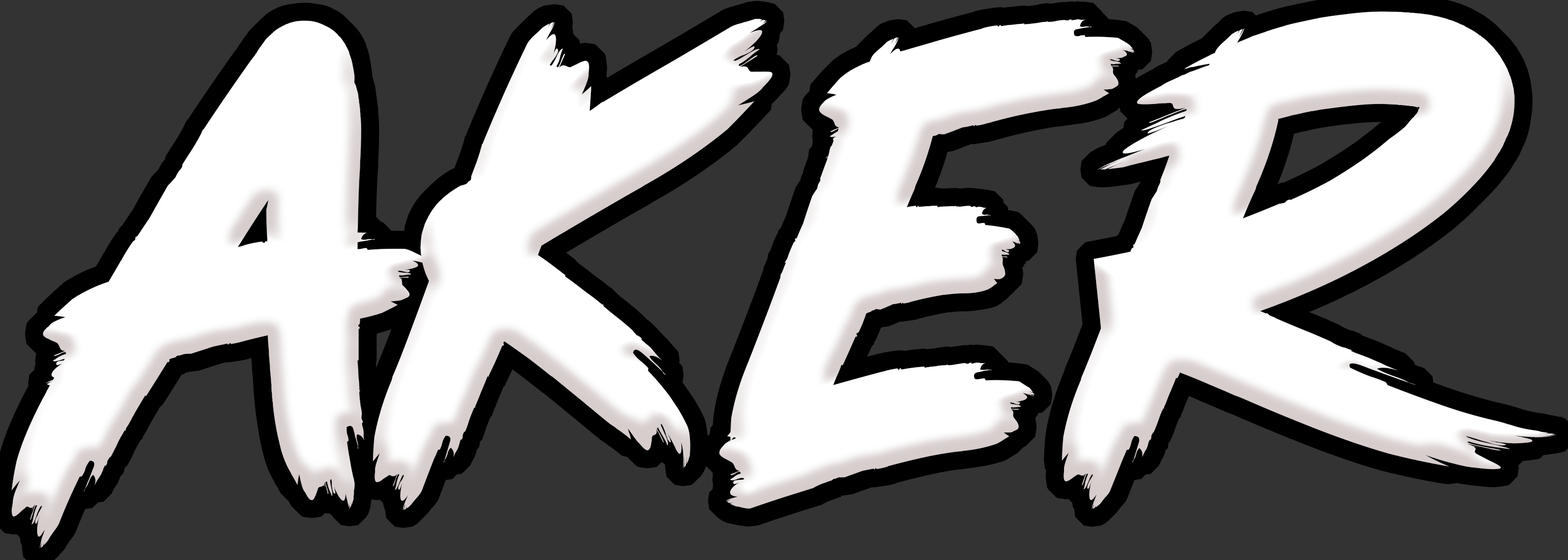
<style>
.page{position:relative;width:1568px;height:560px;background:#333333}
.page>*{position:absolute;margin:0}
.t1{font:741px "PinkBlue";color:#ffffff}
</style>
<div class="page">
<p class="t1" style="left:12px;top:11px;width:1545px;height:538px">Aker</p>
</div>
